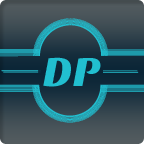
<style>
.page{position:relative;width:144px;height:144px}
.page>*{position:absolute;margin:0}
.t1{font:42px "SansitaOne";color:#21bfd0}
</style>
<div class="page">
<p class="t1" style="left:43px;top:57px;width:58px;height:30px">DP</p>
</div>
